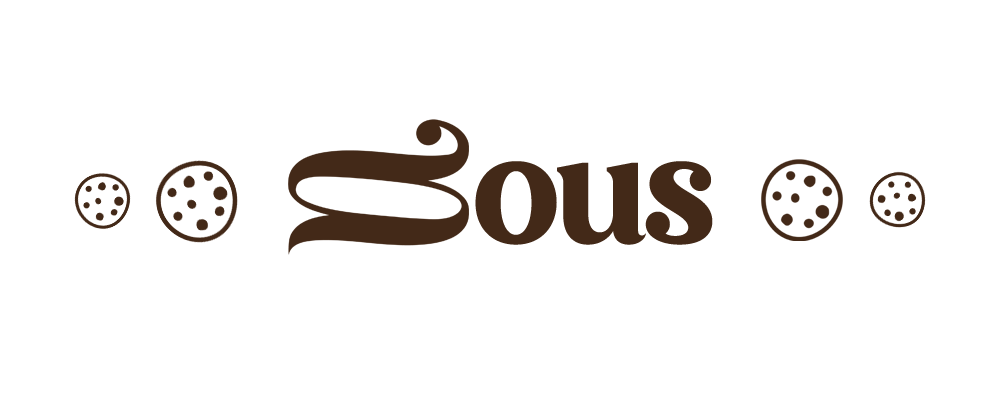
<style>
.page{position:relative;width:1000px;height:400px;background:#ffffff}
.page>*{position:absolute;margin:0}
.t1{font:154.5px "Avigea";letter-spacing:-0.01em;color:#432918}
</style>
<div class="page">
<p class="t1" style="left:475px;top:161px;width:238px;height:84px">ous</p>
</div>
